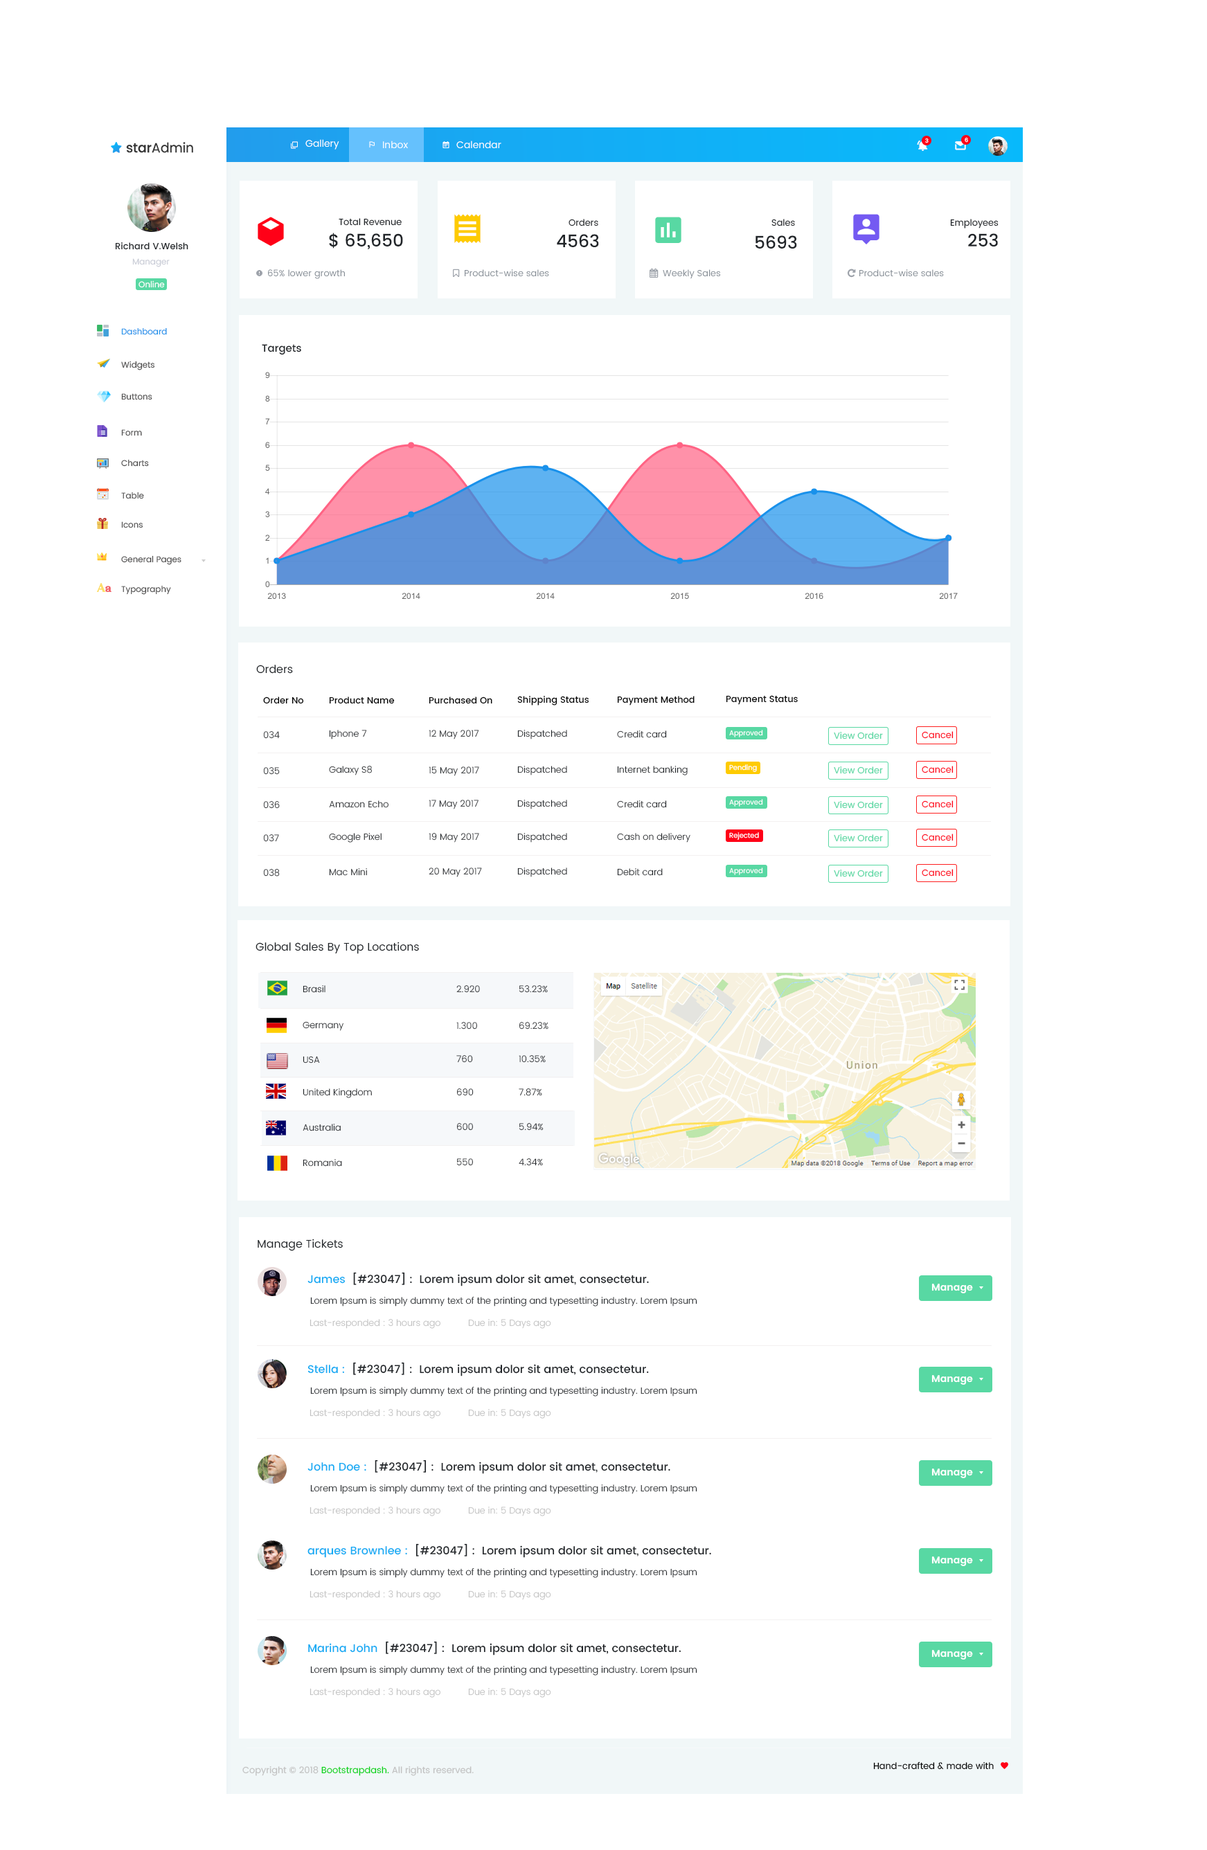
<style>
.page{position:relative;width:1207px;height:1850px;background:#ffffff}
.page>*{position:absolute;margin:0}
.t1{font:5.5px "Poppins-Medium";color:#ffffff}
.t2{font:5.5px "Poppins-Medium"}
.t3{font:9.7px "Poppins-Regular";color:#ffffff}
.t4{font:9px "Poppins-Regular";color:#212529}
.t5{font:17.3px "Poppins-Medium";color:#212529}
.t6{font:9px "Poppins-Medium";color:#212529}
.t7{font:8.3px "Poppins-Regular";color:#cacdd7}
.t8{font:9px "Poppins-Regular";color:#868e96}
.t9{font:8.3px "Poppins-Regular";color:#ffffff}
.t10{font:8.3px "Poppins-Regular";color:#1991eb}
.t11{font:10.4px "Poppins-Medium";color:#212529}
.t12{font:8.3px "Poppins-Regular";color:#4a4949}
.t13{font:11.1px "Poppins-Regular";color:#212529}
.t14{font:9px "Poppins-Medium";color:#000000}
.t15{font:9px "Poppins-Light"}
.t16{font:9px "Poppins-Light";color:#212529}
.t17{font:6.9px "Poppins-Regular";color:#ffffff}
.t18{font:9px "Poppins-Regular";color:#58d8a3}
.t19{font:9px "Poppins-Regular";color:#ff0017}
.t20{font:11.1px "Poppins-Medium";color:#212529}
.t21{font:11.1px "Poppins-Medium";color:#14acf4}
.t22{font:9.7px "Poppins-SemiBold";color:#ffffff}
.t23{font:9px "Poppins-Light";color:#c2c2c2}
.t24{font:9px "Poppins-Regular";color:#c2c2c2}
.t25{font:9px "Poppins-Regular";color:#08d419}
.t26{font:9px "Poppins-Regular";color:#000000}
</style>
<div class="page">
<p class="t1" style="left:925px;top:138px;width:3px;height:5px">3</p>
<p class="t2" style="left:964px;top:137px;width:4px;height:6px">6</p>
<p class="t3" style="left:305px;top:139px;width:34px;height:11px">Gallery</p>
<p class="t3" style="left:383px;top:141px;width:25px;height:7px">Inbox</p>
<p class="t3" style="left:456px;top:141px;width:45px;height:7px">Calendar</p>
<p class="t4" style="left:339px;top:218px;width:63px;height:8px">Total Revenue</p>
<p class="t4" style="left:568px;top:219px;width:30px;height:7px">Orders</p>
<p class="t4" style="left:771px;top:219px;width:24px;height:7px">Sales</p>
<p class="t4" style="left:950px;top:219px;width:48px;height:9px">Employees</p>
<p class="t5" style="left:329px;top:233px;width:74px;height:16px">$ 65,650</p>
<p class="t5" style="left:968px;top:233px;width:30px;height:13px">253</p>
<p class="t6" style="left:115px;top:242px;width:73px;height:8px">Richard V.Welsh</p>
<p class="t5" style="left:557px;top:234px;width:42px;height:13px">4563</p>
<p class="t5" style="left:755px;top:235px;width:42px;height:14px">5693</p>
<p class="t7" style="left:132px;top:258px;width:38px;height:9px">Manager</p>
<p class="t8" style="left:268px;top:269px;width:77px;height:10px">65% lower growth</p>
<p class="t8" style="left:465px;top:269px;width:84px;height:7px">Product-wise sales</p>
<p class="t8" style="left:663px;top:269px;width:57px;height:10px">Weekly Sales</p>
<p class="t8" style="left:859px;top:269px;width:85px;height:7px">Product-wise sales</p>
<p class="t9" style="left:138px;top:280px;width:27px;height:8px">Online</p>
<p class="t10" style="left:121px;top:327px;width:46px;height:8px">Dashboard</p>
<p class="t11" style="left:262px;top:344px;width:39px;height:11px">Targets</p>
<p class="t12" style="left:121px;top:361px;width:34px;height:9px">Widgets</p>
<p class="t12" style="left:121px;top:393px;width:31px;height:7px">Buttons</p>
<p class="t12" style="left:121px;top:429px;width:21px;height:7px">Form</p>
<p class="t12" style="left:121px;top:459px;width:28px;height:8px">Charts</p>
<p class="t12" style="left:121px;top:492px;width:23px;height:7px">Table</p>
<p class="t12" style="left:121px;top:521px;width:22px;height:7px">Icons</p>
<p class="t12" style="left:121px;top:555px;width:60px;height:10px">General Pages</p>
<p class="t12" style="left:121px;top:585px;width:50px;height:10px">Typography</p>
<p class="t13" style="left:256px;top:665px;width:37px;height:9px">Orders</p>
<p class="t14" style="left:263px;top:696px;width:41px;height:8px">Order No</p>
<p class="t14" style="left:329px;top:696px;width:66px;height:8px">Product Name</p>
<p class="t14" style="left:429px;top:696px;width:63px;height:8px">Purchased On</p>
<p class="t14" style="left:517px;top:696px;width:71px;height:9px">Shipping Status</p>
<p class="t14" style="left:617px;top:696px;width:77px;height:9px">Payment Method</p>
<p class="t14" style="left:726px;top:695px;width:72px;height:10px">Payment Status</p>
<p class="t15" style="left:263px;top:731px;width:17px;height:8px">034</p>
<p class="t16" style="left:329px;top:730px;width:38px;height:9px">Iphone 7</p>
<p class="t16" style="left:429px;top:730px;width:50px;height:9px">12 May 2017</p>
<p class="t16" style="left:517px;top:730px;width:50px;height:9px">Dispatched</p>
<p class="t16" style="left:617px;top:730px;width:50px;height:8px">Credit card</p>
<p class="t17" style="left:729px;top:730px;width:34px;height:7px">Approved</p>
<p class="t18" style="left:834px;top:732px;width:49px;height:7px">View Order</p>
<p class="t19" style="left:921px;top:731px;width:32px;height:8px">Cancel</p>
<p class="t15" style="left:263px;top:767px;width:17px;height:8px">035</p>
<p class="t16" style="left:329px;top:766px;width:43px;height:9px">Galaxy S8</p>
<p class="t16" style="left:429px;top:766px;width:50px;height:10px">15 May 2017</p>
<p class="t16" style="left:517px;top:766px;width:50px;height:9px">Dispatched</p>
<p class="t16" style="left:617px;top:766px;width:70px;height:9px">Internet banking</p>
<p class="t17" style="left:729px;top:764px;width:28px;height:8px">Pending</p>
<p class="t18" style="left:834px;top:766px;width:49px;height:8px">View Order</p>
<p class="t19" style="left:921px;top:766px;width:32px;height:7px">Cancel</p>
<p class="t15" style="left:263px;top:801px;width:17px;height:8px">036</p>
<p class="t16" style="left:329px;top:800px;width:59px;height:8px">Amazon Echo</p>
<p class="t16" style="left:429px;top:800px;width:49px;height:9px">17 May 2017</p>
<p class="t16" style="left:517px;top:800px;width:50px;height:9px">Dispatched</p>
<p class="t16" style="left:617px;top:800px;width:50px;height:8px">Credit card</p>
<p class="t17" style="left:729px;top:799px;width:34px;height:8px">Approved</p>
<p class="t18" style="left:834px;top:801px;width:49px;height:8px">View Order</p>
<p class="t19" style="left:921px;top:800px;width:32px;height:8px">Cancel</p>
<p class="t16" style="left:329px;top:833px;width:52px;height:10px">Google Pixel</p>
<p class="t16" style="left:429px;top:833px;width:50px;height:10px">19 May 2017</p>
<p class="t16" style="left:517px;top:833px;width:50px;height:10px">Dispatched</p>
<p class="t16" style="left:617px;top:833px;width:73px;height:10px">Cash on delivery</p>
<p class="t17" style="left:729px;top:832px;width:30px;height:8px">Rejected</p>
<p class="t19" style="left:921px;top:834px;width:32px;height:7px">Cancel</p>
<p class="t15" style="left:263px;top:834px;width:16px;height:8px">037</p>
<p class="t18" style="left:834px;top:834px;width:49px;height:8px">View Order</p>
<p class="t15" style="left:263px;top:869px;width:17px;height:7px">038</p>
<p class="t16" style="left:329px;top:868px;width:38px;height:8px">Mac Mini</p>
<p class="t16" style="left:429px;top:867px;width:53px;height:10px">20 May 2017</p>
<p class="t16" style="left:517px;top:867px;width:50px;height:10px">Dispatched</p>
<p class="t16" style="left:617px;top:868px;width:46px;height:8px">Debit card</p>
<p class="t17" style="left:729px;top:867px;width:34px;height:8px">Approved</p>
<p class="t18" style="left:834px;top:870px;width:49px;height:7px">View Order</p>
<p class="t19" style="left:921px;top:869px;width:32px;height:7px">Cancel</p>
<p class="t13" style="left:255px;top:942px;width:164px;height:12px">Global Sales By Top Locations</p>
<p class="t16" style="left:303px;top:985px;width:22px;height:8px">Brasil</p>
<p class="t15" style="left:456px;top:985px;width:24px;height:8px">2.920</p>
<p class="t15" style="left:519px;top:985px;width:29px;height:8px">53.23%</p>
<p class="t16" style="left:303px;top:1021px;width:40px;height:10px">Germany</p>
<p class="t15" style="left:456px;top:1022px;width:21px;height:7px">1.300</p>
<p class="t15" style="left:519px;top:1022px;width:29px;height:7px">69.23%</p>
<p class="t16" style="left:303px;top:1056px;width:17px;height:7px">USA</p>
<p class="t16" style="left:456px;top:1055px;width:17px;height:8px">760</p>
<p class="t16" style="left:519px;top:1055px;width:27px;height:8px">10.35%</p>
<p class="t16" style="left:303px;top:1088px;width:69px;height:10px">United Kingdom</p>
<p class="t16" style="left:456px;top:1088px;width:18px;height:8px">690</p>
<p class="t15" style="left:519px;top:1088px;width:23px;height:8px">7.87%</p>
<p class="t16" style="left:303px;top:1124px;width:38px;height:7px">Australia</p>
<p class="t15" style="left:456px;top:1123px;width:17px;height:8px">600</p>
<p class="t15" style="left:519px;top:1123px;width:24px;height:8px">5.94%</p>
<p class="t16" style="left:303px;top:1159px;width:39px;height:8px">Romania</p>
<p class="t15" style="left:456px;top:1158px;width:17px;height:8px">550</p>
<p class="t16" style="left:519px;top:1158px;width:24px;height:8px">4.34%</p>
<p class="t13" style="left:258px;top:1239px;width:85px;height:12px">Manage Tickets</p>
<p class="t20" style="left:307px;top:1272px;width:342px;height:14px"><span class="t21">James </span> [#23047] :  Lorem ipsum dolor sit amet, consectetur.</p>
<p class="t22" style="left:931px;top:1284px;width:42px;height:9px">Manage</p>
<p class="t16" style="left:310px;top:1296px;width:387px;height:10px">Lorem Ipsum is simply dummy text of the printing and typesetting industry. Lorem Ipsum</p>
<p class="t23" style="left:309px;top:1319px;width:131px;height:10px">Last-responded : 3 hours ago</p>
<p class="t23" style="left:468px;top:1319px;width:83px;height:10px">Due in: 5 Days ago</p>
<p class="t20" style="left:307px;top:1362px;width:342px;height:14px"><span class="t21">Stella : </span> [#23047] :  Lorem ipsum dolor sit amet, consectetur.</p>
<p class="t22" style="left:931px;top:1375px;width:42px;height:10px">Manage</p>
<p class="t16" style="left:310px;top:1386px;width:387px;height:10px">Lorem Ipsum is simply dummy text of the printing and typesetting industry. Lorem Ipsum</p>
<p class="t23" style="left:309px;top:1409px;width:131px;height:10px">Last-responded : 3 hours ago</p>
<p class="t23" style="left:468px;top:1409px;width:83px;height:10px">Due in: 5 Days ago</p>
<p class="t20" style="left:307px;top:1459px;width:363px;height:15px"><span class="t21">John Doe : </span> [#23047] :  Lorem ipsum dolor sit amet, consectetur.</p>
<p class="t22" style="left:931px;top:1468px;width:42px;height:10px">Manage</p>
<p class="t16" style="left:310px;top:1484px;width:387px;height:10px">Lorem Ipsum is simply dummy text of the printing and typesetting industry. Lorem Ipsum</p>
<p class="t23" style="left:309px;top:1506px;width:131px;height:10px">Last-responded : 3 hours ago</p>
<p class="t23" style="left:468px;top:1506px;width:83px;height:10px">Due in: 5 Days ago</p>
<p class="t20" style="left:307px;top:1543px;width:404px;height:15px"><span class="t21">arques Brownlee : </span> [#23047] :  Lorem ipsum dolor sit amet, consectetur.</p>
<p class="t22" style="left:931px;top:1556px;width:42px;height:10px">Manage</p>
<p class="t16" style="left:310px;top:1567px;width:387px;height:11px">Lorem Ipsum is simply dummy text of the printing and typesetting industry. Lorem Ipsum</p>
<p class="t23" style="left:309px;top:1590px;width:131px;height:10px">Last-responded : 3 hours ago</p>
<p class="t23" style="left:468px;top:1590px;width:83px;height:10px">Due in: 5 Days ago</p>
<p class="t20" style="left:308px;top:1641px;width:373px;height:14px"><span class="t21">Marina John </span> [#23047] :  Lorem ipsum dolor sit amet, consectetur.</p>
<p class="t22" style="left:931px;top:1650px;width:42px;height:9px">Manage</p>
<p class="t16" style="left:310px;top:1665px;width:387px;height:10px">Lorem Ipsum is simply dummy text of the printing and typesetting industry. Lorem Ipsum</p>
<p class="t23" style="left:309px;top:1688px;width:131px;height:10px">Last-responded : 3 hours ago</p>
<p class="t23" style="left:468px;top:1688px;width:83px;height:10px">Due in: 5 Days ago</p>
<p class="t24" style="left:242px;top:1766px;width:232px;height:10px">Copyright © 2018<span class="t25"> Bootstrapdash.</span> All rights reserved.</p>
<p class="t26" style="left:873px;top:1761px;width:120px;height:9px">Hand-crafted &amp; made with</p>
</div>
